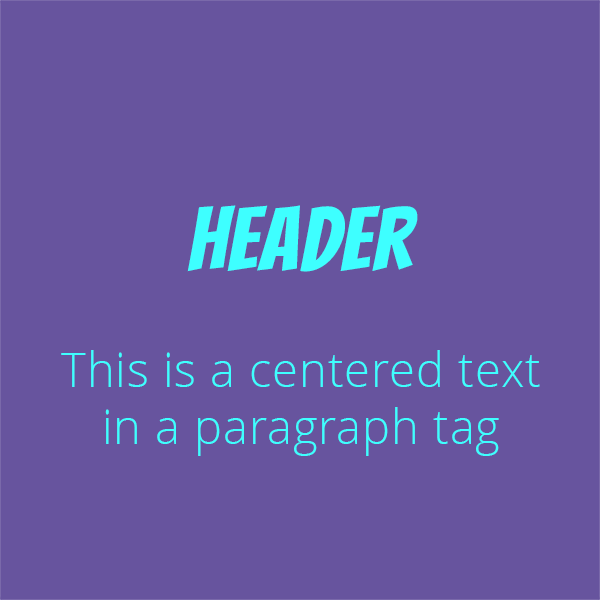
<style>
.page{position:relative;width:600px;height:600px;background:#67549e}
.page>*{position:absolute;margin:0}
.t1{font:88.6px "Bangers-Regular";letter-spacing:0.02em;color:#3effff}
.t2{font:47px "OpenSans-Light";letter-spacing:0.02em;color:#3effff}
</style>
<div class="page">
<p class="t1" style="left:187px;top:205px;width:231px;height:67px">Header</p>
<p class="t2" style="left:61px;top:350px;width:479px;height:106px;text-align:center">This is a centered text in a paragraph tag</p>
</div>
